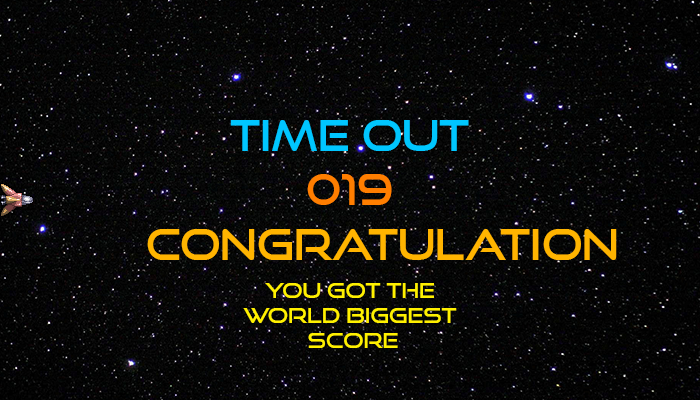
<style>
.page{position:relative;width:700px;height:400px}
.page>*{position:absolute;margin:0}
.t1{font:41.7px "GoodTimesRg-Regular";color:#00c6ff}
.t2{font:41.7px "GoodTimesRg-Regular";color:#ff7e00}
.t3{font:41.7px "GoodTimesRg-Regular";color:#ffb400}
.t4{font:20.8px "GoodTimesRg-Regular";color:#fff000}
</style>
<div class="page">
<p class="t1" style="left:230px;top:120px;width:239px;height:31px">TIME OUT</p>
<p class="t2" style="left:307px;top:174px;width:85px;height:31px">019</p>
<p class="t3" style="left:147px;top:229px;width:470px;height:31px">COngratulation</p>
<p class="t4" style="left:243px;top:283px;width:214px;height:65px;text-align:center">You got the <br>world biggest <br>score</p>
</div>
